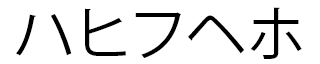
<style>
.page{position:relative;width:320px;height:64px;background:#ffffff}
.page>*{position:absolute;margin:0}
.t1{font:60px "KozGoPr6N-Regular";color:#000000}
</style>
<div class="page">
<p class="t1" style="left:16px;top:7px;width:286px;height:52px">ハヒフヘホ</p>
</div>
